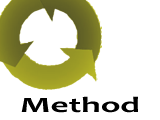
<style>
.page{position:relative;width:160px;height:120px;background:#ffffff}
.page>*{position:absolute;margin:0}
.t1{font:22px "Candara-Bold";color:#000000;scale:1.6 1}
</style>
<div class="page">
<p class="t1" style="left:21px;top:96px;width:117px;height:17px">Method</p>
</div>
